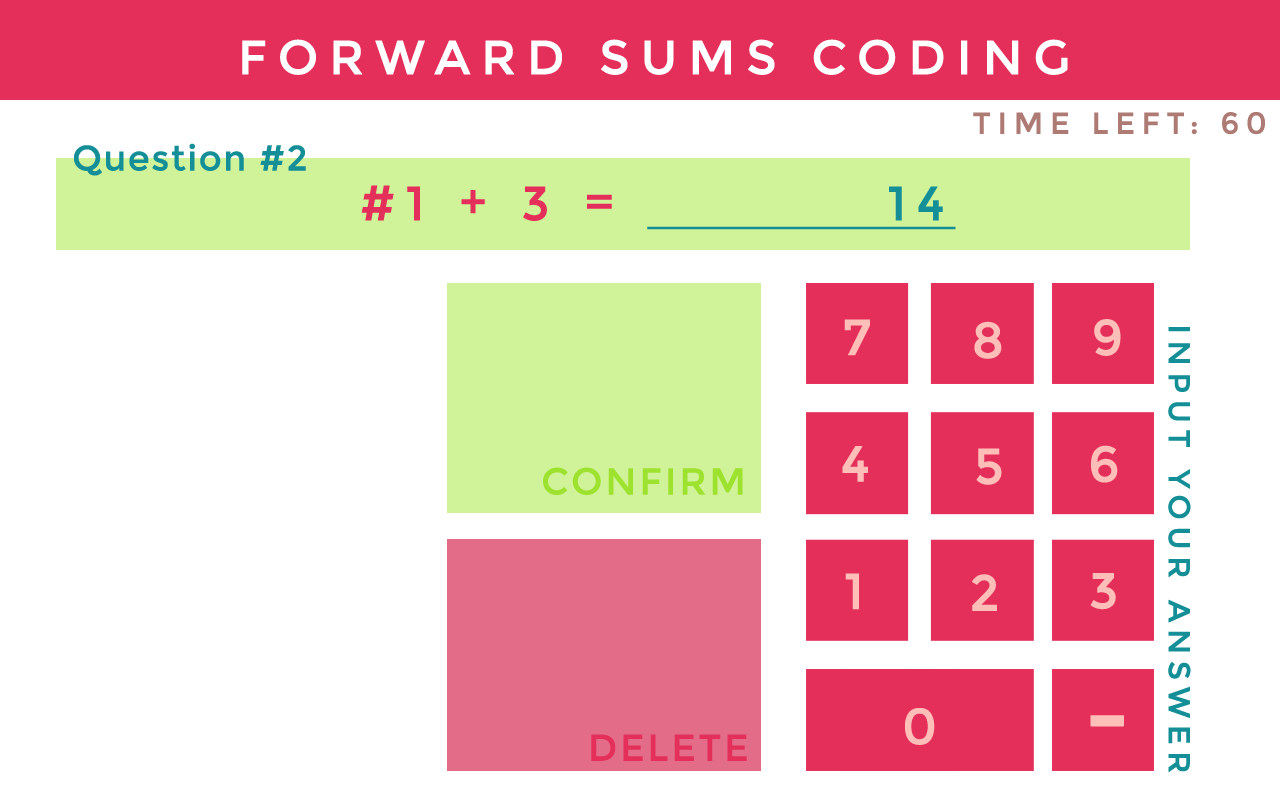
<style>
.page{position:relative;width:1280px;height:800px;background:#ffffff}
.page>*{position:absolute;margin:0}
.t1{font:48px "Montserrat-Regular";letter-spacing:0.2em;color:#ffffff;text-transform:uppercase;font-weight:bold}
.t2{font:30px "Montserrat-Regular";letter-spacing:0.2em;color:#ad7a74;text-transform:uppercase;font-weight:bold}
.t3{font:35px "Montserrat-Regular";letter-spacing:0.025em;color:#148f97;font-weight:bold}
.t4{font:48px "Montserrat-Regular";letter-spacing:0.2em;color:#e42f5a;font-weight:bold}
.t5{font:48px "Montserrat-Regular";letter-spacing:0.2em;color:#148f97;font-weight:bold;text-decoration:underline}
.t6{font:50.3px "Montserrat-Regular";letter-spacing:0.2em;color:#ffbfb8;text-transform:uppercase;font-weight:bold}
.t7{font:30px "Montserrat-Regular";letter-spacing:0.2em;color:#148f97;text-transform:uppercase;font-weight:bold}
.t8{font:37.3px "Montserrat-Regular";letter-spacing:0.05em;color:#9de22f;text-transform:uppercase;font-weight:bold}
.t9{font:97.3px "Montserrat-Regular";letter-spacing:0.2em;color:#ffbfb8;text-transform:uppercase;font-weight:bold}
.t10{font:37.3px "Montserrat-Regular";letter-spacing:0.05em;color:#e42f5a;text-transform:uppercase;font-weight:bold}
</style>
<div class="page">
<p class="t1" style="left:242px;top:39px;width:826px;height:36px">Forward Sums Coding</p>
<p class="t2" style="left:973px;top:112px;width:292px;height:23px">Time Left: 60</p>
<p class="t3" style="left:74px;top:143px;width:232px;height:33px">Question #2</p>
<p class="t4" style="left:361px;top:185px;width:251px;height:36px">#1 + 3 =</p>
<p class="t5" style="left:647px;top:186px;width:309px;height:44px">14</p>
<p class="t6" style="left:844px;top:319px;width:26px;height:37px">7</p>
<p class="t6" style="left:974px;top:321px;width:28px;height:38px">8</p>
<p class="t6" style="left:1094px;top:319px;width:27px;height:37px">9</p>
<p class="t7" style="left:1168px;top:327px;width:23px;height:446px;rotate:90deg">Input your Answer</p>
<p class="t6" style="left:842px;top:446px;width:26px;height:36px">4</p>
<p class="t6" style="left:976px;top:448px;width:26px;height:37px">5</p>
<p class="t6" style="left:1091px;top:445px;width:27px;height:38px">6</p>
<p class="t8" style="left:543px;top:467px;width:200px;height:28px">Confirm</p>
<p class="t6" style="left:845px;top:573px;width:14px;height:37px">1</p>
<p class="t6" style="left:972px;top:574px;width:25px;height:37px">2</p>
<p class="t6" style="left:1090px;top:573px;width:26px;height:37px">3</p>
<p class="t6" style="left:905px;top:708px;width:30px;height:37px">0</p>
<p class="t9" style="left:1090px;top:715px;width:34px;height:12px">-</p>
<p class="t10" style="left:591px;top:734px;width:156px;height:27px">Delete</p>
</div>
